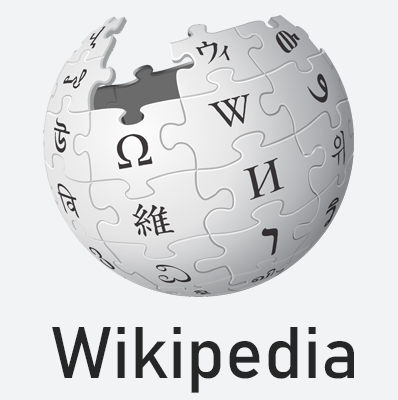
<style>
.page{position:relative;width:398px;height:400px;background:#f1f3f4}
.page>*{position:absolute;margin:0}
.t1{font:72px "Bahnschrift";color:#262626}
</style>
<div class="page">
<p class="t1" style="left:52px;top:327px;width:302px;height:66px">Wikipedia</p>
</div>
